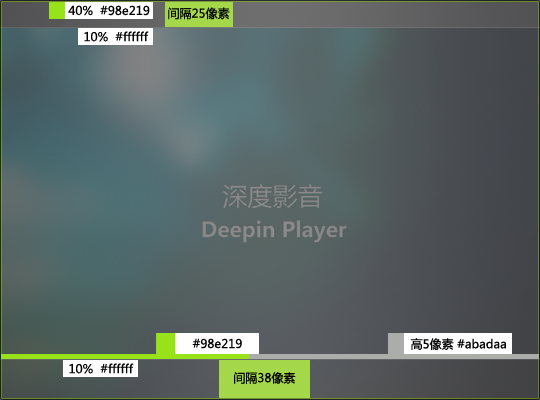
<style>
.page{position:relative;width:540px;height:400px}
.page>*{position:absolute;margin:0}
.t1{font:12px "MicrosoftYaHei";color:#000000}
</style>
<div class="page">
<p class="t1" style="left:68px;top:5px;width:82px;height:11px">40%  #98e219</p>
<p class="t1" style="left:168px;top:7px;width:62px;height:13px">间隔25像素</p>
<p class="t1" style="left:84px;top:31px;width:65px;height:11px">10%  #ffffff</p>
<p class="t1" style="left:192px;top:338px;width:50px;height:11px">#98e219</p>
<p class="t1" style="left:410px;top:338px;width:96px;height:12px">高5像素 #abadaa</p>
<p class="t1" style="left:69px;top:363px;width:65px;height:11px">10%  #ffffff</p>
<p class="t1" style="left:234px;top:372px;width:62px;height:12px">间隔38像素</p>
</div>
